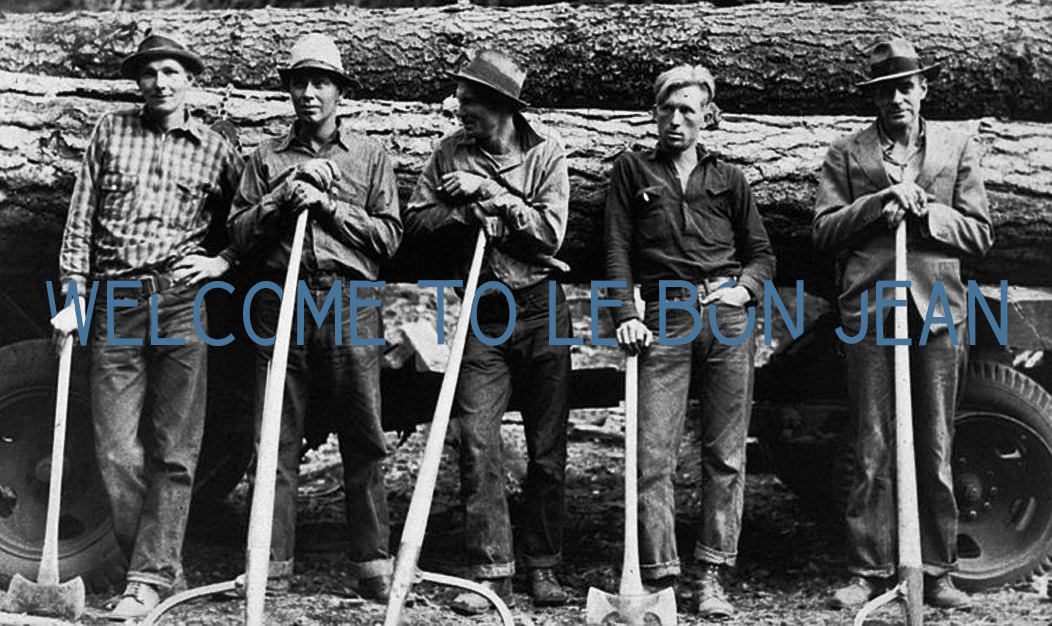
<style>
.page{position:relative;width:1052px;height:626px}
.page>*{position:absolute;margin:0}
.t1{font:80px "TALLBOYRegular";color:#487399}
</style>
<div class="page">
<p class="t1" style="left:46px;top:279px;width:962px;height:67px">WELCOME TO LE BON JEAN</p>
</div>
